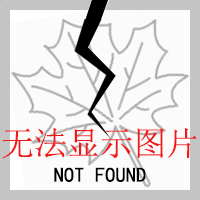
<style>
.page{position:relative;width:200px;height:200px;background:#fbfbfb}
.page>*{position:absolute;margin:0}
.t1{font:33px "SimSun";color:#f31717}
.t2{font:20.6px "SimHei";color:#000000}
</style>
<div class="page">
<p class="t1" style="left:2px;top:127px;width:195px;height:32px">无法显示图片</p>
<p class="t2" style="left:54px;top:167px;width:92px;height:15px">NOT FOUND</p>
</div>
